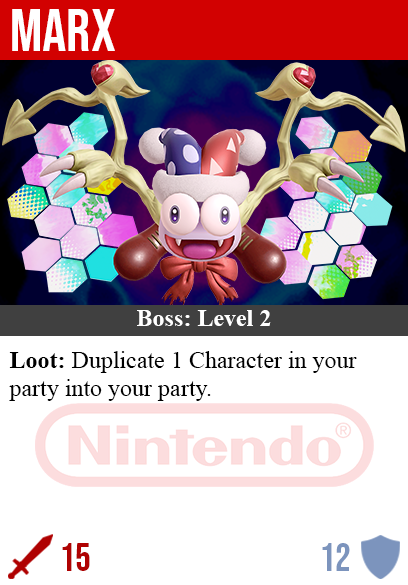
<style>
.page{position:relative;width:408px;height:585px;background:#ffffff}
.page>*{position:absolute;margin:0}
.t1{font:60px "BebasNeue-Regular";color:#ffffff}
.t2{font:24px "TimesNewRomanPS-BoldMT";color:#ffffff}
.t3{font:24px "TimesNewRomanPSMT";color:#000000}
.t4{font:24px "TimesNewRomanPS-BoldMT";color:#000000}
.t5{font:40px "BebasNeue-Regular";color:#af0202}
.t6{font:40px "BebasNeue-Regular";color:#7c94bd}
</style>
<div class="page">
<p class="t1" style="left:12px;top:9px;width:103px;height:42px">marx</p>
<p class="t2" style="left:137px;top:310px;width:134px;height:16px">Boss: Level 2</p>
<p class="t3" style="left:9px;top:351px;width:348px;height:50px"><span class="t4">Loot:</span> Duplicate 1 Character in your<br>party into your party.</p>
<p class="t5" style="left:62px;top:543px;width:28px;height:28px">15</p>
<p class="t6" style="left:322px;top:543px;width:28px;height:28px">12</p>
</div>
